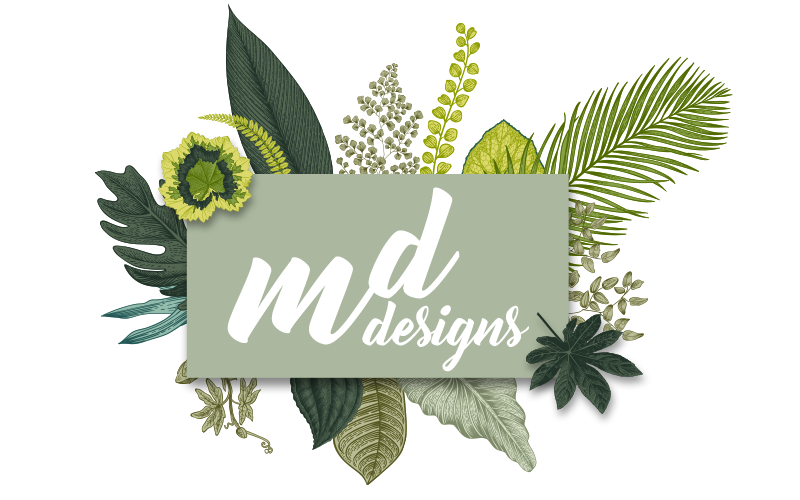
<style>
.page{position:relative;width:800px;height:500px;background:#ffffff}
.page>*{position:absolute;margin:0}
.t1{font:134.9px "Bernadette";letter-spacing:-0.025em;color:#ffffff}
.t2{font:169px "Bernadette";letter-spacing:-0.025em;color:#ffffff}
.t3{font:54.4px "Bernadette";letter-spacing:-0.025em;color:#ffffff}
</style>
<div class="page">
<p class="t1" style="left:368px;top:187px;width:92px;height:112px">d</p>
<p class="t2" style="left:227px;top:256px;width:149px;height:89px">m</p>
<p class="t3" style="left:362px;top:301px;width:167px;height:71px">designs</p>
</div>
